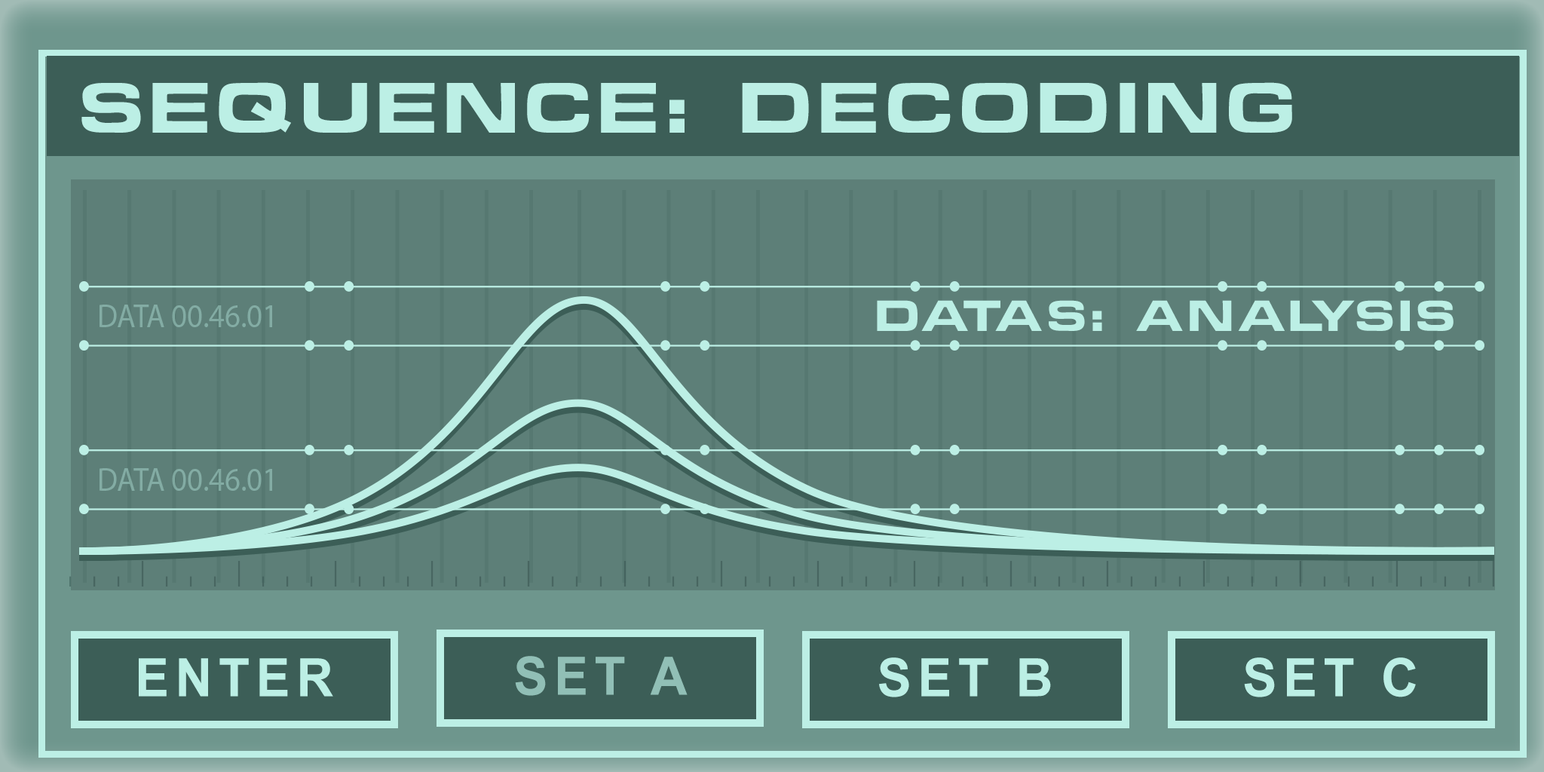
<style>
.page{position:relative;width:1544px;height:772px;background:#5d7f78}
.page>*{position:absolute;margin:0}
.t1{font:65.4px "ChinoCapsSSK";letter-spacing:0.12em;color:#bcefe5}
.t2{font:39.8px "ChinoCapsSSK";letter-spacing:0.12em;color:#bcefe5}
.t3{font:52.8px "Arial-BoldMT";letter-spacing:0.12em;color:#bcefe5}
.t4{font:52.8px "Arial-BoldMT";letter-spacing:0.12em;color:#91bfb6}
</style>
<div class="page">
<p class="t1" style="left:81px;top:82px;width:1211px;height:51px">SEQUENCE: DECODING</p>
<p class="t2" style="left:877px;top:300px;width:577px;height:31px">DATAS: ANALYSIS</p>
<p class="t3" style="left:139px;top:658px;width:194px;height:39px">ENTER</p>
<p class="t4" style="left:515px;top:656px;width:173px;height:40px">SET A</p>
<p class="t3" style="left:879px;top:658px;width:172px;height:39px">SET B</p>
<p class="t3" style="left:1244px;top:658px;width:172px;height:39px">SET C</p>
</div>
